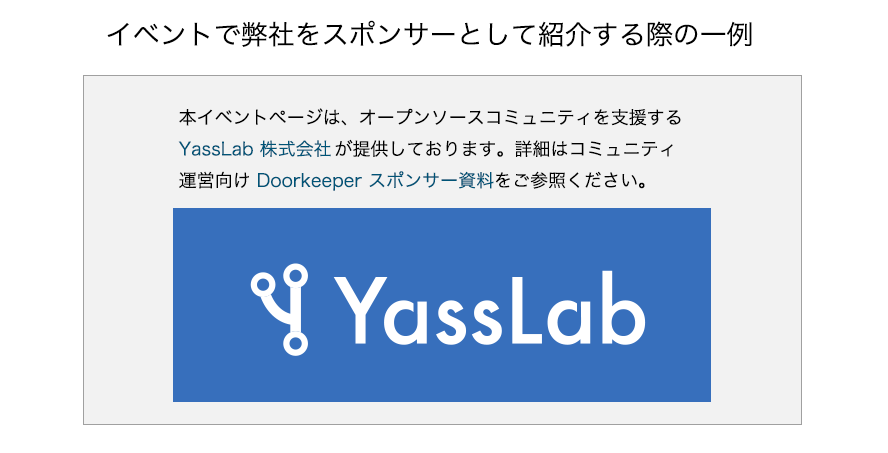
<style>
.page{position:relative;width:888px;height:453px;background:#ffffff}
.page>*{position:absolute;margin:0}
.t1{font:27px "HiraKakuProN-W3";color:#000000}
.t2{font:18px "HiraKakuProN-W3";color:#000000}
.t3{font:18px "HiraKakuProN-W3";color:#005477}
</style>
<div class="page">
<p class="t1" style="left:107px;top:20px;width:645px;height:27px">イベントで弊社をスポンサーとして紹介する際の一例</p>
<p class="t2" style="left:178px;top:108px;width:503px;height:83px">本イベントページは、オープンソースコミュニティを支援する <span class="t3">YassLab 株式会社</span>が提供しております。詳細はコミュニティ<br>運営向け <span class="t3">Doorkeeper スポンサー資料</span>をご参照ください。</p>
</div>
